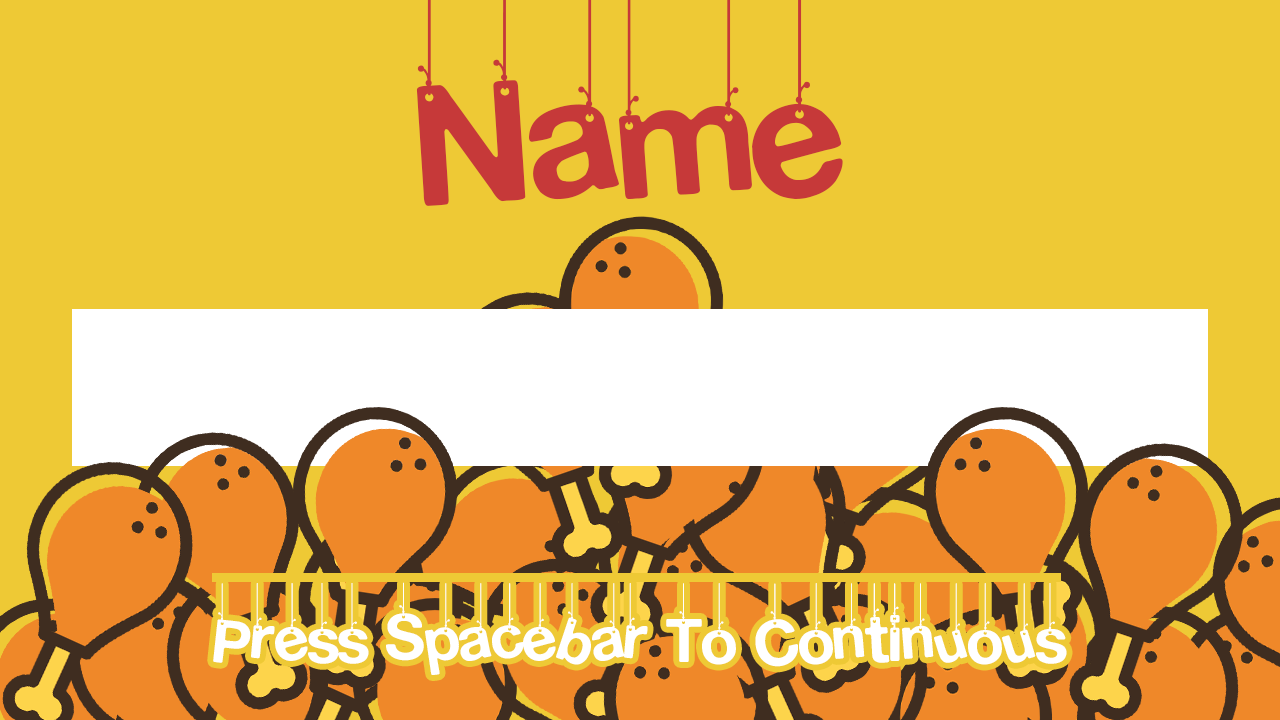
<style>
.page{position:relative;width:1280px;height:720px;background:#eec935}
.page>*{position:absolute;margin:0}
.t1{font:72px "HangingLetters";color:#ffffff}
</style>
<div class="page">
<p class="t1" style="left:213px;top:582px;width:854px;height:93px">Press Spacebar To Continuous</p>
</div>
